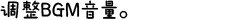
<style>
.page{position:relative;width:248px;height:20px;background:#ffffff}
.page>*{position:absolute;margin:0}
.t1{font:22px "¢è?";color:#000000}
</style>
<div class="page">
<p class="t1" style="left:0px;top:0px;width:128px;height:19px">调整BGM音量。</p>
</div>
